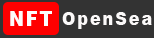
<style>
.page{position:relative;width:154px;height:38px;background:#333333}
.page>*{position:absolute;margin:0}
.t1{font:19.8px "Arial-Black";letter-spacing:0.1em;color:#fdfbfb;scale:0.91 1}
.t2{font:18px "Arial-Black";letter-spacing:0.1em;color:#fbf9f9;scale:0.91 1}
</style>
<div class="page">
<p class="t1" style="left:10px;top:11px;width:42px;height:15px">NFT</p>
<p class="t2" style="left:62px;top:12px;width:90px;height:17px">OpenSea</p>
</div>
